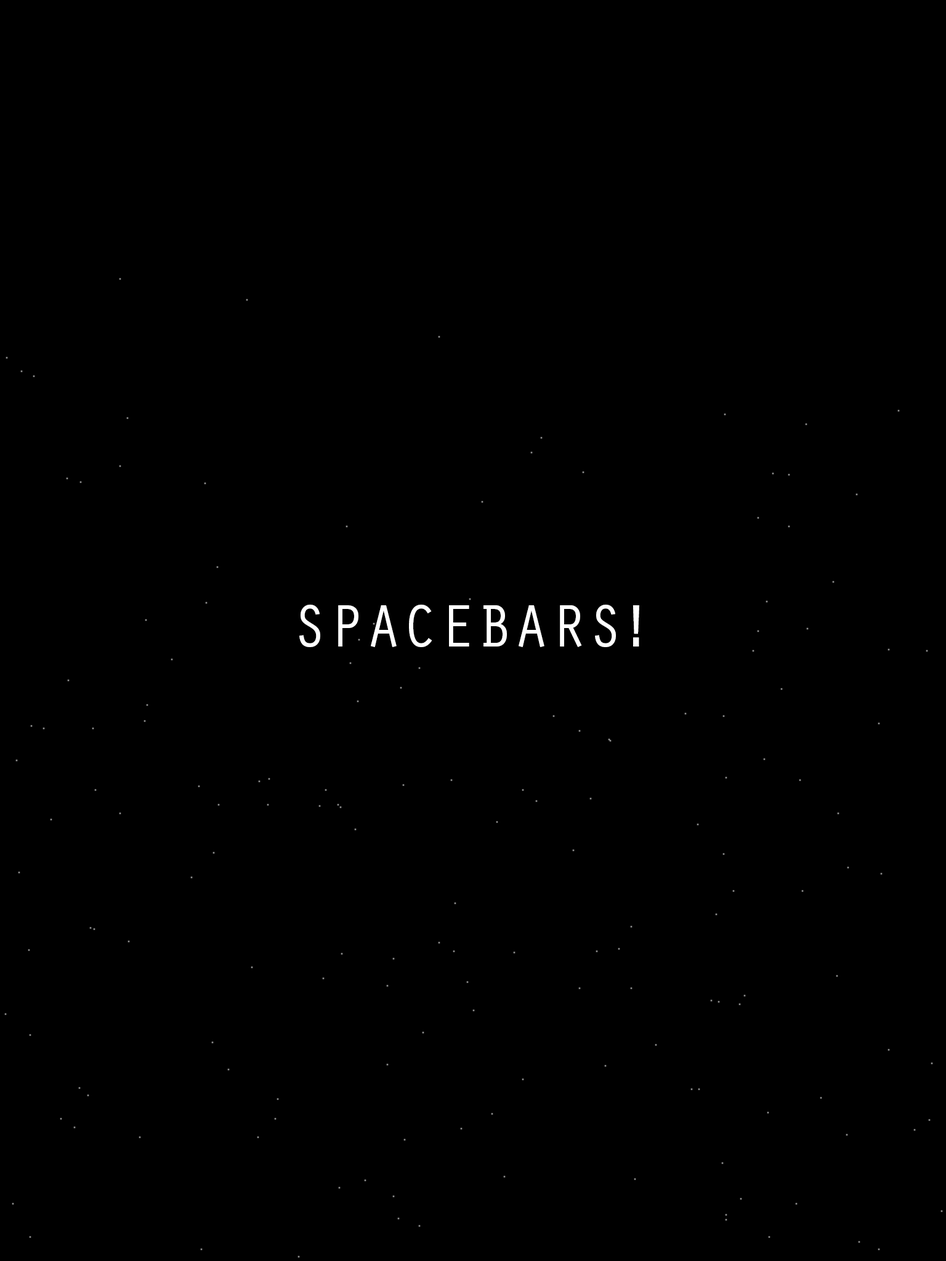
<style>
.page{position:relative;width:946px;height:1261px;background:#000000}
.page>*{position:absolute;margin:0}
.t1{font:61.6px "OratorStd";color:#ffffff}
.t2{font:61.6px "OratorStd";letter-spacing:-0.1em;color:#ffffff}
</style>
<div class="page">
<p class="t1" style="left:299px;top:605px;width:340px;height:42px">SPACEBAR<span class="t2">S!</span></p>
</div>
